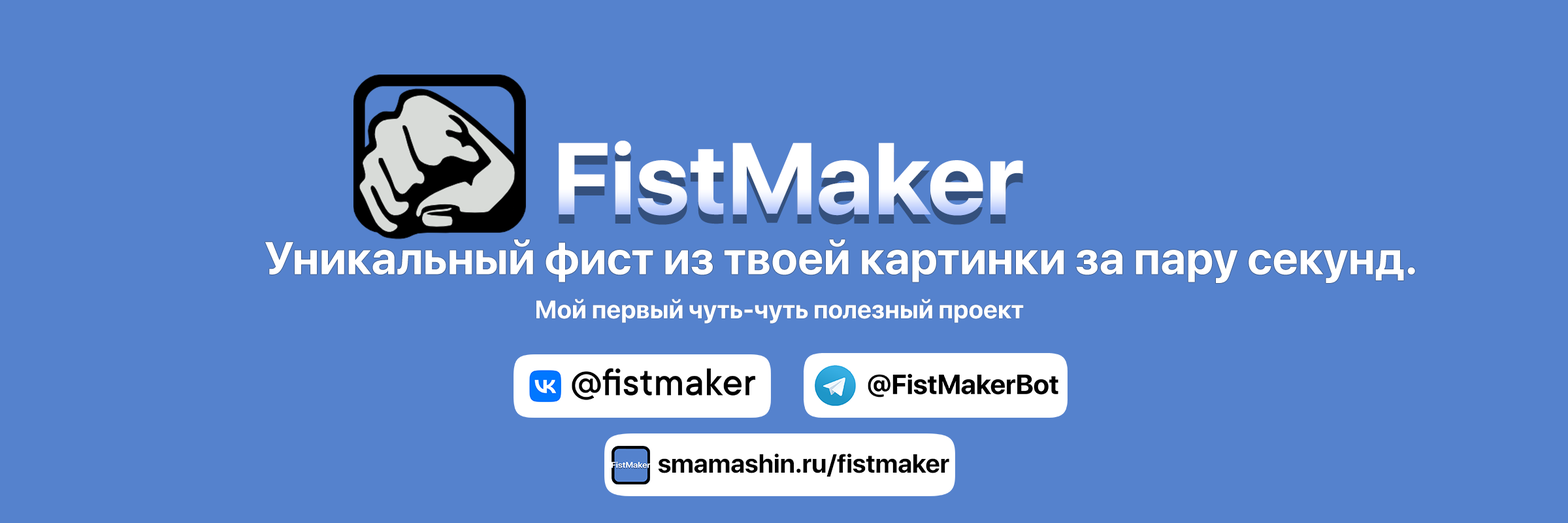
<style>
.page{position:relative;width:1568px;height:523px;background:#5582cd}
.page>*{position:absolute;margin:0}
.t1{font:100.9px "SFProDisplay-Bold";color:#ffffff;scale:1.04 1}
.t2{font:45.7px "SFProDisplay-Bold";color:#ffffff}
.t3{font:25.3px "SFProDisplay-Bold";color:#ffffff}
.t4{font:26.1px "SFProDisplay-Bold";color:#000000}
</style>
<div class="page">
<p class="t1" style="left:559px;top:140px;width:464px;height:76px">FistMaker</p>
<p class="t2" style="left:265px;top:239px;width:1150px;height:44px">Уникальный фист из твоей картинки за пару секунд.</p>
<p class="t3" style="left:536px;top:299px;width:488px;height:24px">Мой первый чуть-чуть полезный проект</p>
<p class="t4" style="left:658px;top:453px;width:291px;height:23px">smamashin.ru/fistmaker</p>
</div>
